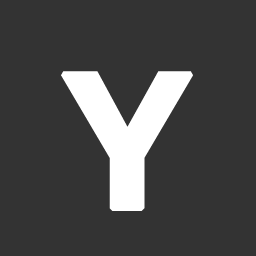
<style>
.page{position:relative;width:256px;height:256px;background:#333333}
.page>*{position:absolute;margin:0}
.t1{font:190px "BreezeSans-Bold";color:#ffffff;font-weight:bold;scale:1.05 1}
</style>
<div class="page">
<p class="t1" style="left:61px;top:71px;width:132px;height:140px">Y</p>
</div>
